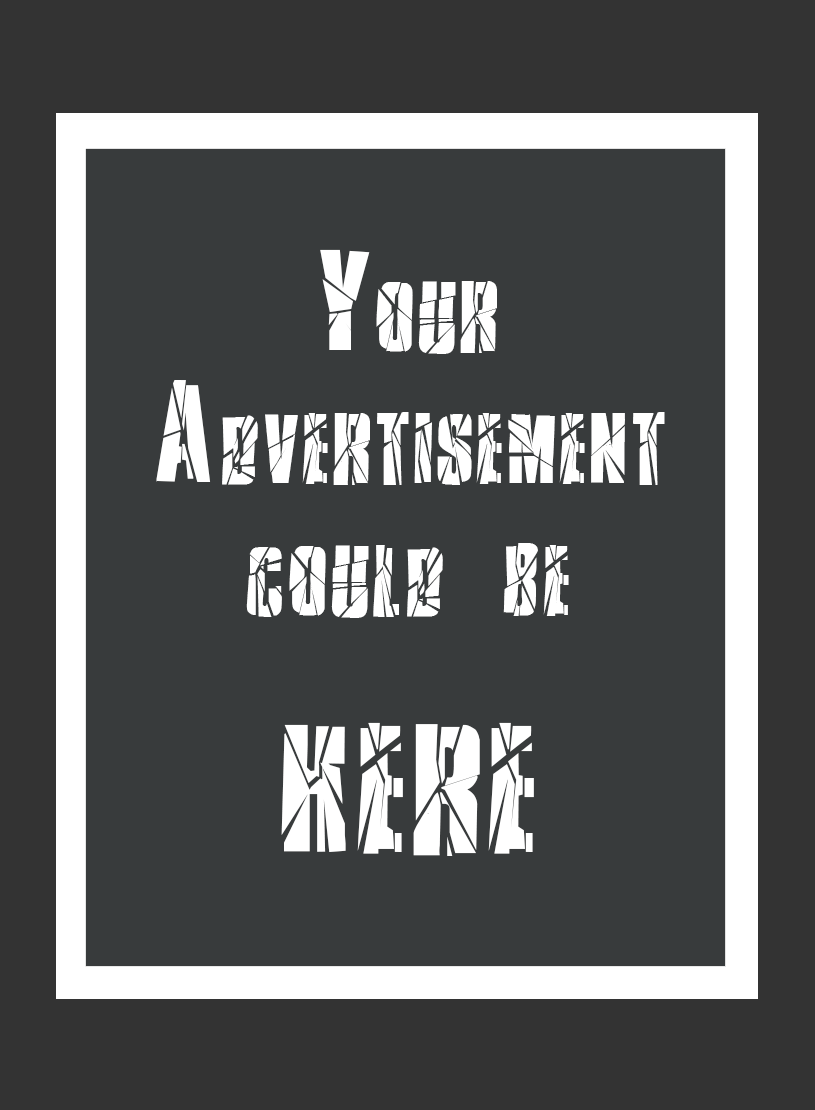
<style>
.page{position:relative;width:815px;height:1110px;background:#383b3c}
.page>*{position:absolute;margin:0}
.t1{font:110px "RupturedSans";color:#ffffff;font-variant:small-caps}
.t2{font:200px "RupturedSans";color:#ffffff;font-variant:small-caps}
</style>
<div class="page">
<p class="t1" style="left:156px;top:249px;width:509px;height:607px;text-align:center">Your<br>Advertisement<br>could be<br><span class="t2">here</span></p>
</div>
